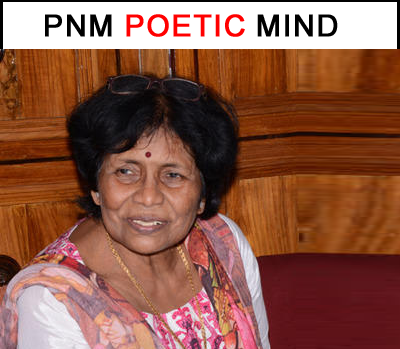
<style>
.page{position:relative;width:400px;height:349px}
.page>*{position:absolute;margin:0}
.t1{font:30px "ArialMT";color:#ff0000;text-transform:uppercase;font-weight:bold}
.t2{font:30px "ArialMT";color:#000000;text-transform:uppercase;font-weight:bold}
</style>
<div class="page">
<p class="t1" style="left:45px;top:14px;width:293px;height:23px"><span class="t2">PNM </span>Poetic<span class="t2"> Mind</span></p>
</div>
